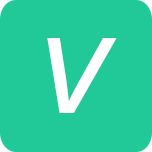
<style>
.page{position:relative;width:152px;height:152px;background:#20c997}
.page>*{position:absolute;margin:0}
.t1{font:144px "Arial-ItalicMT";color:#ffffff}
</style>
<div class="page">
<p class="t1" style="left:47px;top:38px;width:70px;height:75px">v</p>
</div>
